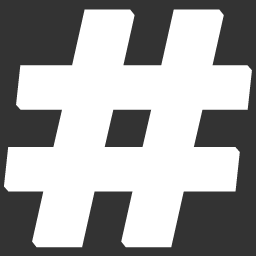
<style>
.page{position:relative;width:256px;height:256px;background:#ffffff}
.page>*{position:absolute;margin:0}
.t1{font:329.5px "BreezeSans-Bold";color:#ffffff;font-weight:bold;scale:1.05 1}
</style>
<div class="page">
<p class="t1" style="left:4px;top:9px;width:248px;height:239px">#</p>
</div>
